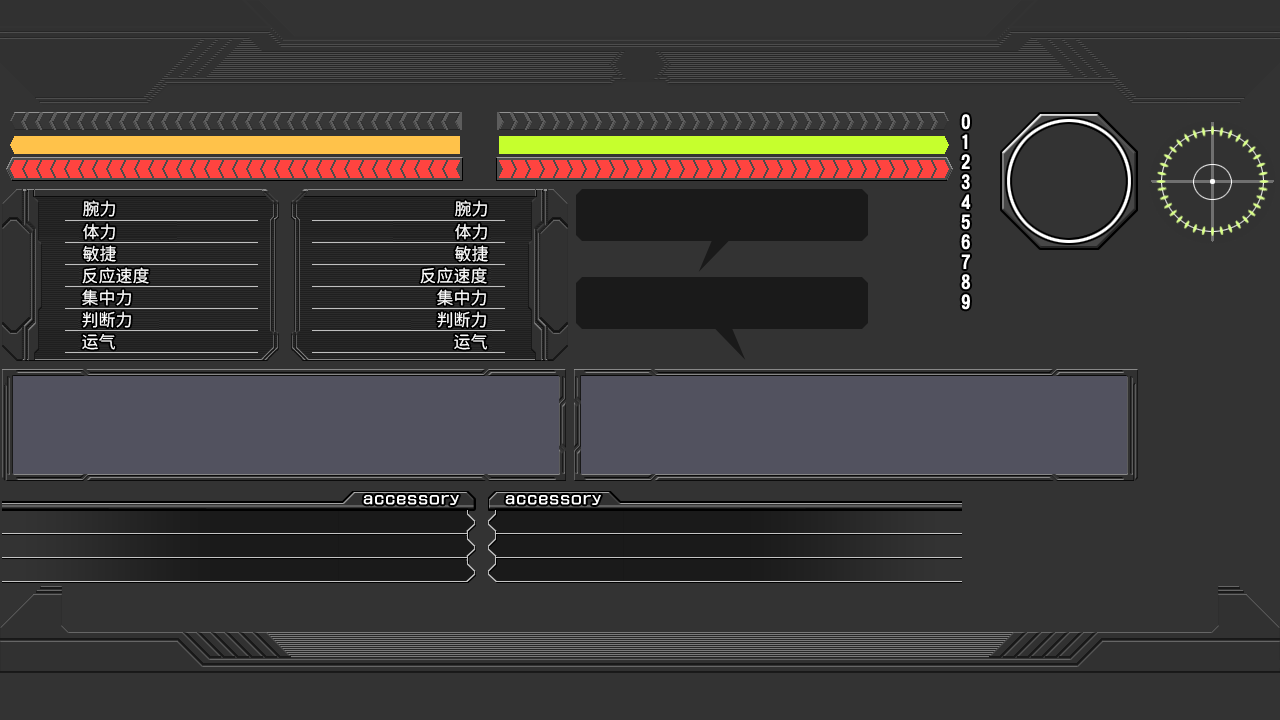
<style>
.page{position:relative;width:1280px;height:720px;background:#333333}
.page>*{position:absolute;margin:0}
.t1{font:17px "Resource-Han-Rounded-CN-Regular";color:#ffffff}
</style>
<div class="page">
<p class="t1" style="left:83px;top:200px;width:32px;height:17px">腕力</p>
<p class="t1" style="left:455px;top:200px;width:32px;height:17px">腕力</p>
<p class="t1" style="left:83px;top:223px;width:32px;height:17px">体力</p>
<p class="t1" style="left:455px;top:223px;width:32px;height:17px">体力</p>
<p class="t1" style="left:83px;top:245px;width:33px;height:17px">敏捷</p>
<p class="t1" style="left:455px;top:245px;width:33px;height:17px">敏捷</p>
<p class="t1" style="left:82px;top:267px;width:67px;height:17px">反应速度</p>
<p class="t1" style="left:420px;top:267px;width:67px;height:17px">反应速度</p>
<p class="t1" style="left:82px;top:289px;width:49px;height:17px">集中力</p>
<p class="t1" style="left:437px;top:289px;width:49px;height:17px">集中力</p>
<p class="t1" style="left:82px;top:311px;width:49px;height:17px">判断力</p>
<p class="t1" style="left:437px;top:311px;width:49px;height:17px">判断力</p>
<p class="t1" style="left:82px;top:334px;width:33px;height:16px">运气</p>
<p class="t1" style="left:454px;top:334px;width:33px;height:16px">运气</p>
</div>
